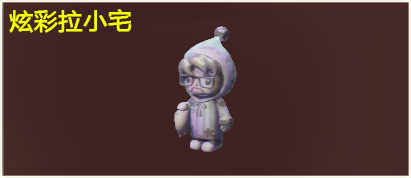
<style>
.page{position:relative;width:411px;height:178px}
.page>*{position:absolute;margin:0}
.t1{font:24px "MicrosoftYaHeiUI";color:#f4ff00;font-weight:bold}
</style>
<div class="page">
<p class="t1" style="left:9px;top:9px;width:123px;height:24px">炫彩拉小宅</p>
</div>
